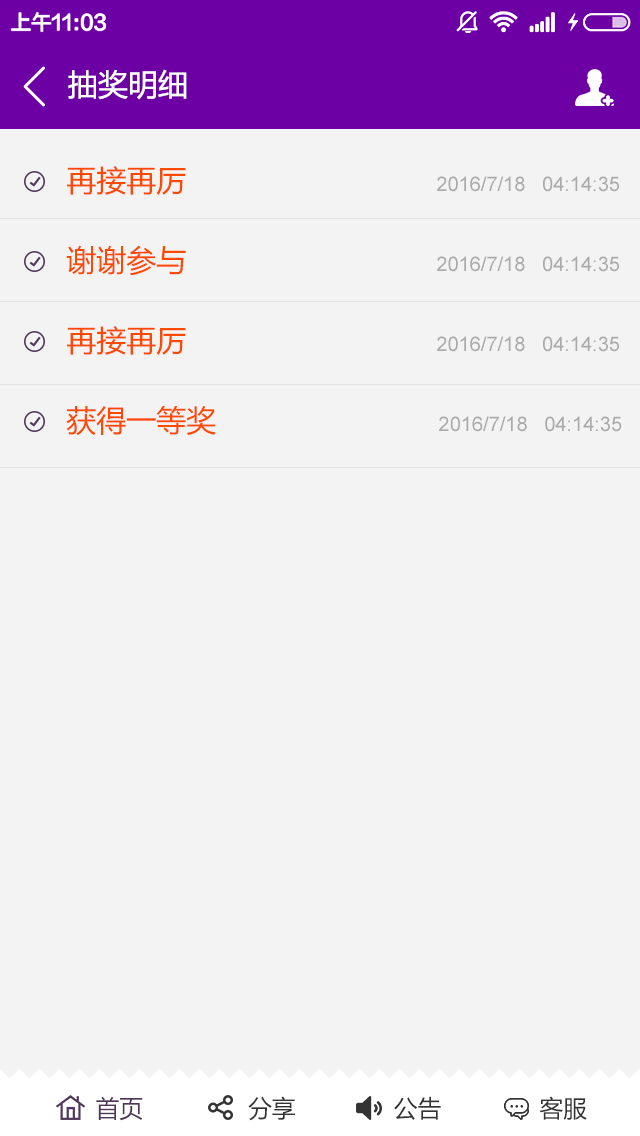
<style>
.page{position:relative;width:640px;height:1136px;background:#f3f3f3}
.page>*{position:absolute;margin:0}
.t1{font:30px "MicrosoftYaHei";color:#ffffff}
.t2{font:20px/40px "ArialMT";color:#abaaaa}
.t3{font:30px/40px "MicrosoftYaHei";color:#ff4800}
.t4{font:24px "MicrosoftYaHei";color:#333333}
.t5{font:24px "MicrosoftYaHei";color:#50385b}
</style>
<div class="page">
<p class="t1" style="left:68px;top:69px;width:119px;height:31px">抽奖明细</p>
<p class="t2" style="left:66px;top:166px;width:556px;height:270px;text-align:justify"><span class="t3">再接再厉                                            </span> 2016/7/18   04:14:35<br><br><span class="t3">谢谢参与                                            </span> 2016/7/18   04:14:35<br><br><span class="t3">再接再厉                                            </span> 2016/7/18   04:14:35<br><br><span class="t3">获得一等奖                                        </span>2016/7/18   04:14:35</p>
<p class="t4" style="left:96px;top:1096px;width:491px;height:25px"><span class="t5">首页</span>               分享              公告              客服</p>
</div>
